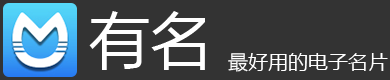
<style>
.page{position:relative;width:390px;height:80px;background:#333333}
.page>*{position:absolute;margin:0}
.t1{font:61.5px "MicrosoftYaHei";color:#ffffff}
.t2{font:20px "MicrosoftYaHei";color:#ffffff}
</style>
<div class="page">
<p class="t1" style="left:89px;top:11px;width:116px;height:59px">有名</p>
<p class="t2" style="left:228px;top:53px;width:160px;height:19px">最好用的电子名片</p>
</div>
